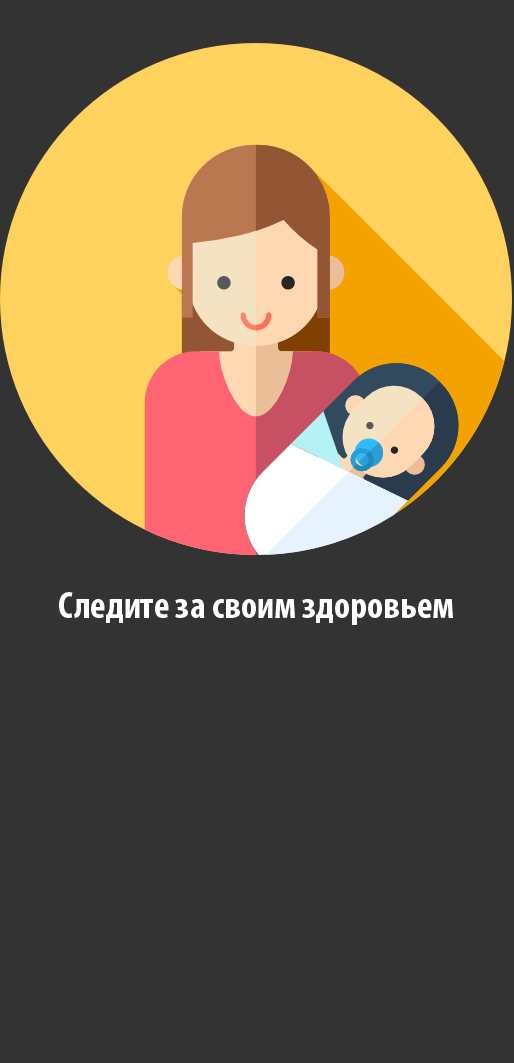
<style>
.page{position:relative;width:514px;height:1063px;background:#333333}
.page>*{position:absolute;margin:0}
.t1{font:37.5px "MyriadPro-BoldCond";color:#ffffff}
</style>
<div class="page">
<p class="t1" style="left:59px;top:592px;width:394px;height:33px">Следите за своим здоровьем</p>
</div>
